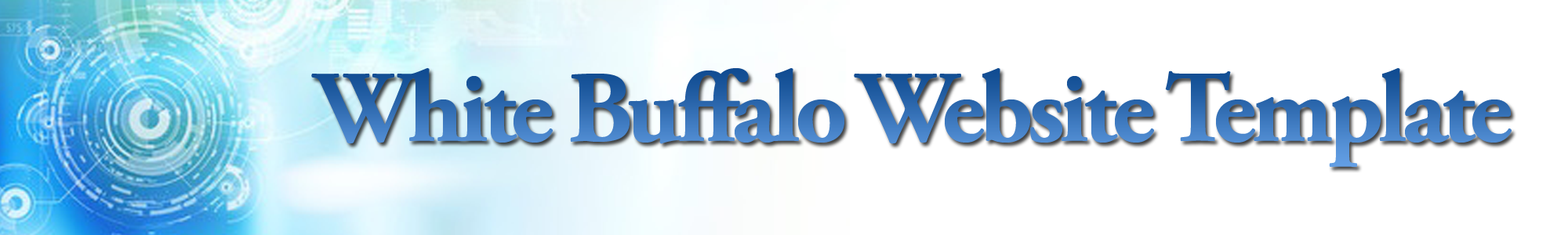
<style>
.page{position:relative;width:1568px;height:235px;background:#ffffff}
.page>*{position:absolute;margin:0}
.t1{font:101.9px "AGaramondPro-Bold";letter-spacing:-0.05em}
</style>
<div class="page">
<p class="t1" style="left:311px;top:67px;width:1201px;height:100px">White Buffalo Website Template</p>
</div>
